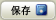
<style>
.page{position:relative;width:56px;height:20px}
.page>*{position:absolute;margin:0}
.t1{font:10px "SimSun";color:#000000}
</style>
<div class="page">
<p class="t1" style="left:11px;top:5px;width:20px;height:11px">保存</p>
</div>
